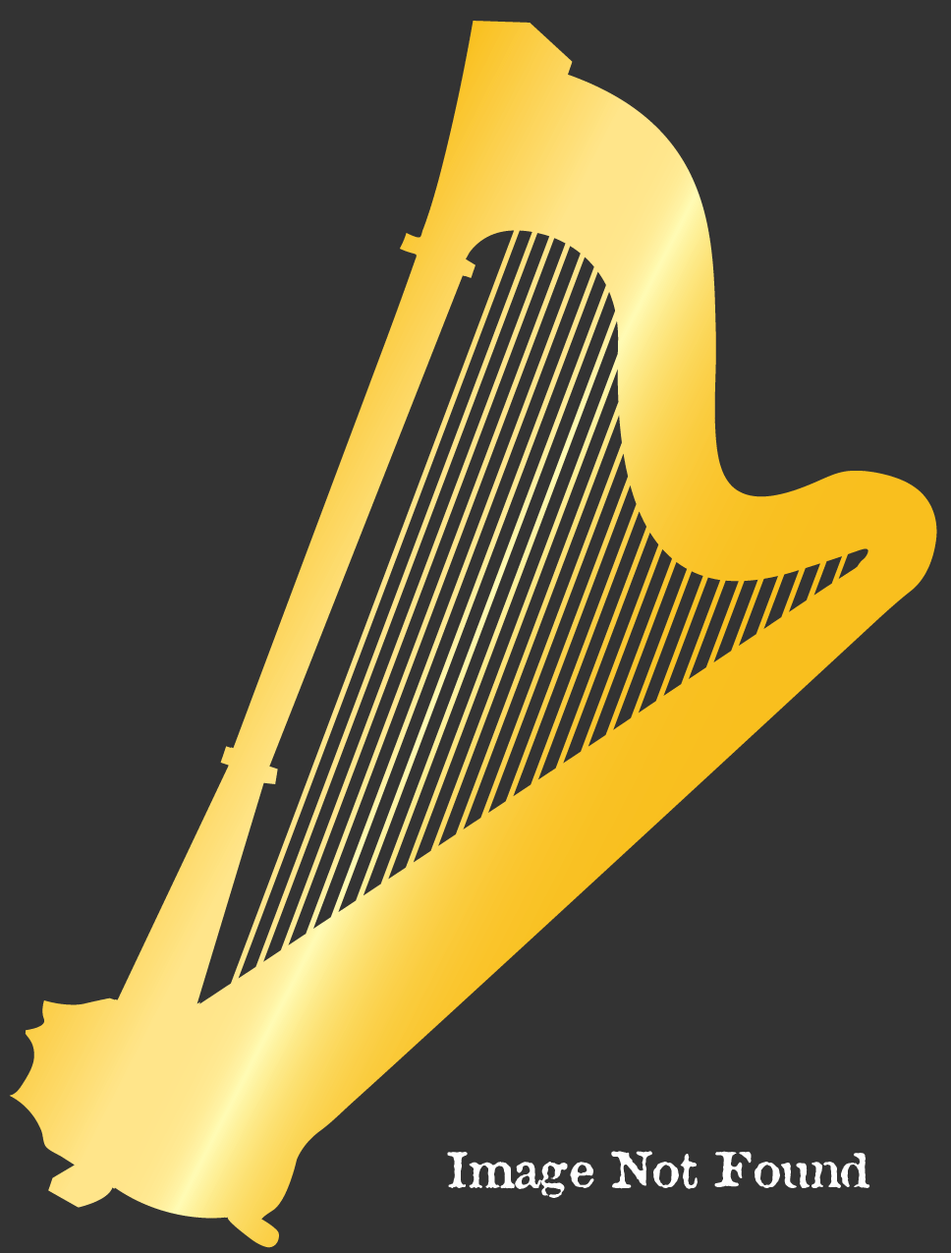
<style>
.page{position:relative;width:951px;height:1253px;background:#333333}
.page>*{position:absolute;margin:0}
.t1{font:47.2px "AtticAntique";color:#fefefe}
</style>
<div class="page">
<p class="t1" style="left:447px;top:1151px;width:424px;height:47px">Image Not Found</p>
</div>
